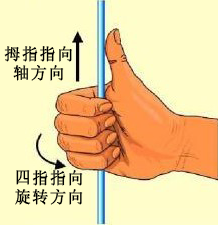
<style>
.page{position:relative;width:218px;height:225px;background:#fffdca}
.page>*{position:absolute;margin:0}
.t1{font:16px "SimSun";letter-spacing:0.075em;color:#000000;font-weight:bold}
</style>
<div class="page">
<p class="t1" style="left:4px;top:46px;width:68px;height:35px;text-align:center">拇指指向<br>轴方向</p>
<p class="t1" style="left:15px;top:170px;width:68px;height:35px;text-align:center">四指指向<br>旋转方向</p>
</div>
